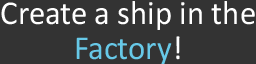
<style>
.page{position:relative;width:256px;height:64px;background:#333333}
.page>*{position:absolute;margin:0}
.t1{font:33.7px/35px "Calibri";color:#ffffff;scale:0.97 1}
.t2{font:33.7px/35px "Calibri";color:#67c9e8;scale:0.97 1}
</style>
<div class="page">
<p class="t1" style="left:1px;top:1px;width:254px;height:64px;text-align:center">Create a ship in the<br><span class="t2">Factory</span>!</p>
</div>
